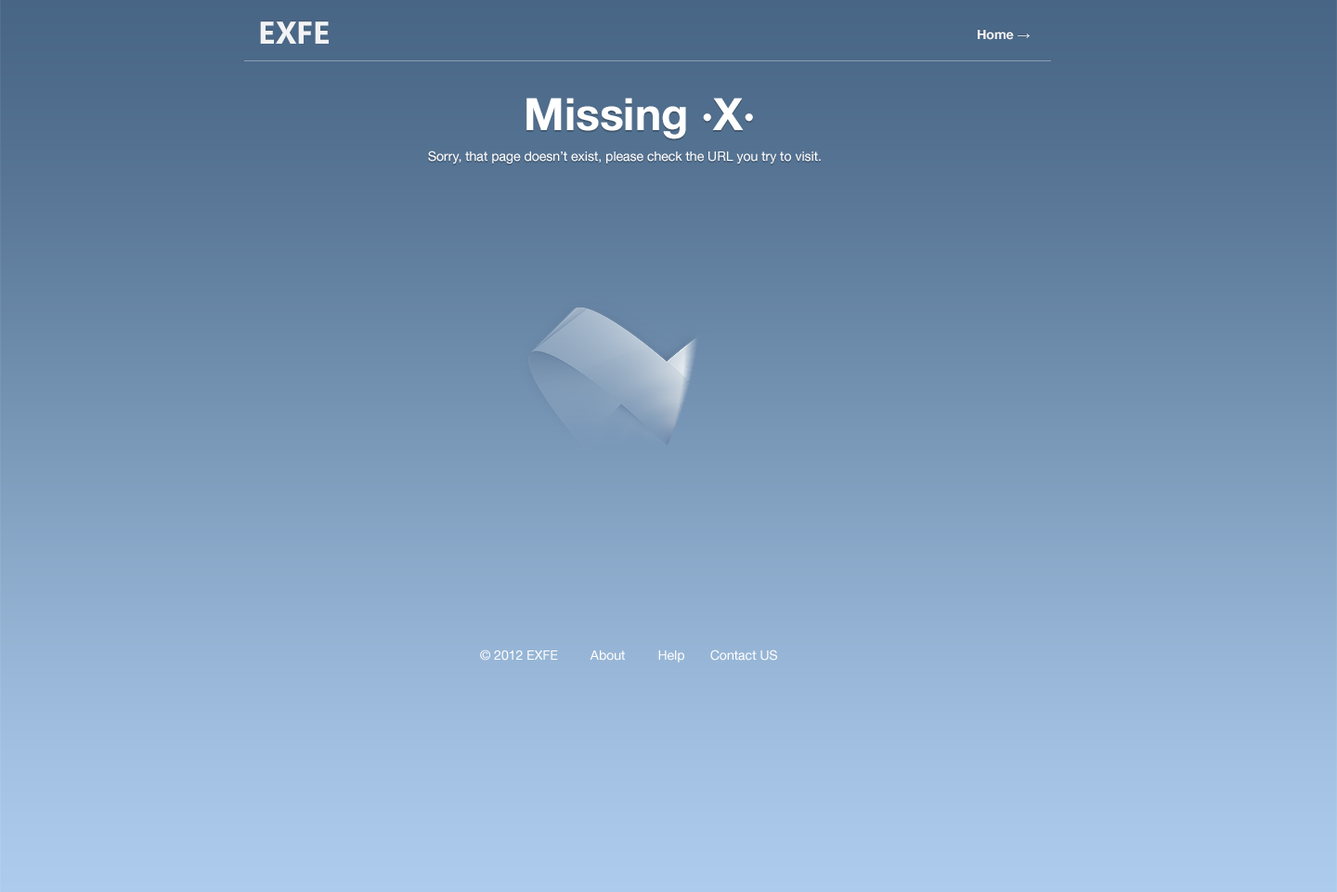
<style>
.page{position:relative;width:1337px;height:892px}
.page>*{position:absolute;margin:0}
.t1{font:31.6px "SegoeUI-Bold";color:#ffffff}
.t2{font:13px "HelveticaNeue-Bold";color:#ffffff}
.t3{font:13px "Arial-BoldMT";color:#ffffff}
.t4{font:44.6px "HelveticaNeue-Bold";color:#ffffff}
.t5{font:13px "HelveticaNeue";color:#ffffff}
</style>
<div class="page">
<p class="t1" style="left:260px;top:21px;width:69px;height:23px">EXFE</p>
<p class="t2" style="left:978px;top:30px;width:52px;height:10px">Home <span class="t3">→</span></p>
<p class="t4" style="left:527px;top:98px;width:226px;height:41px">Missing ·X·</p>
<p class="t5" style="left:428px;top:150px;width:393px;height:13px">Sorry, that page doesn’t exist, please check the URL you try to visit.</p>
<p class="t5" style="left:480px;top:649px;width:297px;height:13px">© 2012 EXFE         About         Help       Contact US</p>
</div>
